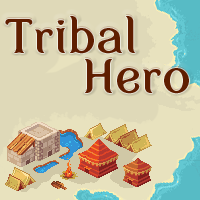
<style>
.page{position:relative;width:200px;height:200px;background:#dfd9b8}
.page>*{position:absolute;margin:0}
.t1{font:48px/40px "MyFairCody";color:#672608}
.t2{font:48px/40px "MyFairCody";color:#5f1e00}
</style>
<div class="page">
<p class="t1" style="left:5px;top:14px;width:184px;height:78px;opacity:0.29">Tribal<br>     Hero</p>
<p class="t2" style="left:5px;top:16px;width:184px;height:78px">Tribal <br>     Hero</p>
</div>
